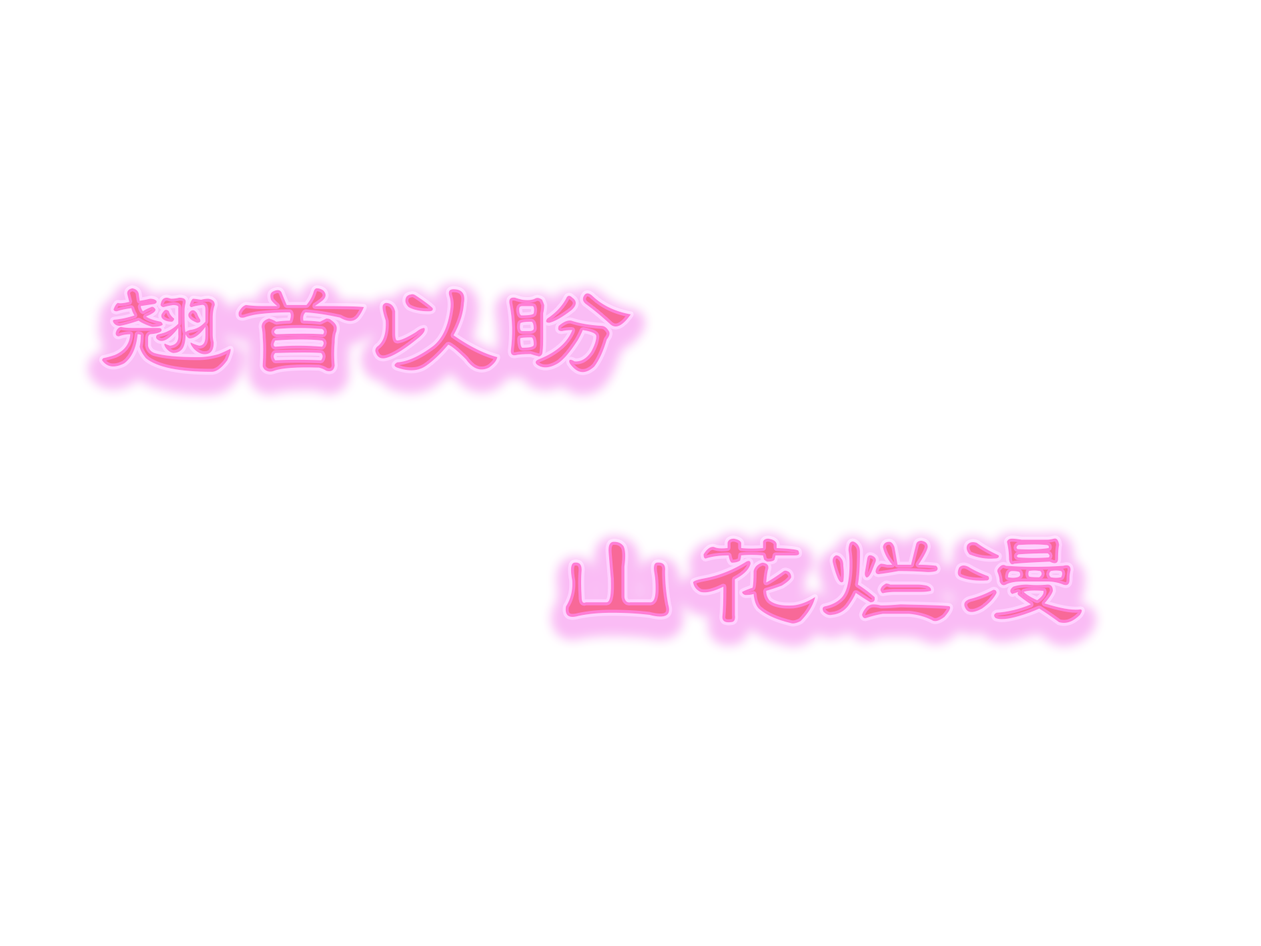
<style>
.page{position:relative;width:1261px;height:946px;background:#ffffff}
.page>*{position:absolute;margin:0}
.t1{font:133.5px "LiSu"}
</style>
<div class="page">
<p class="t1" style="left:102px;top:288px;width:529px;height:84px">翘首以盼</p>
<p class="t1" style="left:565px;top:538px;width:517px;height:85px">山花烂漫</p>
</div>
